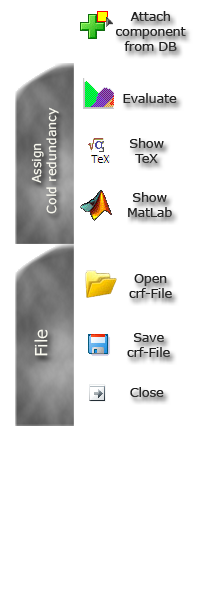
<style>
.page{position:relative;width:200px;height:600px;background:#ffffff}
.page>*{position:absolute;margin:0}
.t1{font:12.5px "Verdana";color:#666666}
.t2{font:12.5px "Verdana";color:#efedde}
.t3{font:16.7px "Verdana";color:#efedde}
</style>
<div class="page">
<p class="t1" style="left:116px;top:11px;width:70px;height:40px;text-align:center">Attach <br>component <br>from DB</p>
<p class="t1" style="left:123px;top:93px;width:54px;height:10px">Evaluate</p>
<p class="t2" style="left:31px;top:107px;width:28px;height:107px;text-align:center;rotate:-90deg">Assign<br> Cold redundancy</p>
<p class="t1" style="left:130px;top:138px;width:34px;height:25px;text-align:center">Show <br>TeX</p>
<p class="t1" style="left:128px;top:192px;width:44px;height:25px;text-align:center">Show <br>MatLab</p>
<p class="t1" style="left:129px;top:274px;width:43px;height:24px;text-align:center">Open <br>crf-File</p>
<p class="t3" style="left:34px;top:329px;width:14px;height:27px;rotate:-90deg">File</p>
<p class="t1" style="left:127px;top:333px;width:43px;height:24px;text-align:center">Save <br>crf-File</p>
<p class="t1" style="left:130px;top:387px;width:34px;height:10px">Close</p>
</div>
